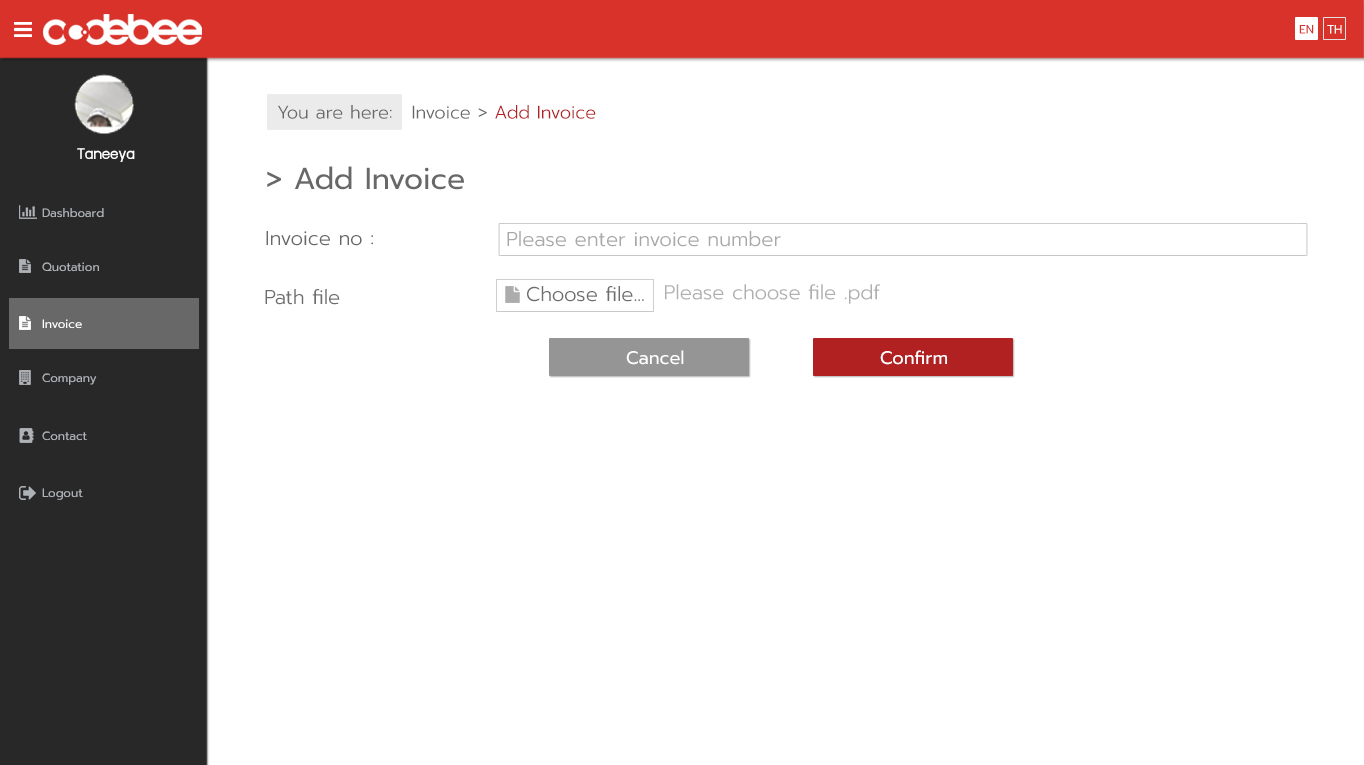
<style>
.page{position:relative;width:1364px;height:765px;background:#ffffff}
.page>*{position:absolute;margin:0}
.t1{font:12px "Prompt-Regular";color:#d8322b}
.t2{font:12px "Prompt-Regular";color:#ffffff}
.t3{font:18px "Prompt-Light";color:#686868}
.t4{font:18px "Prompt-Light";color:#b22121}
.t5{font:18px "supermarket";color:#ffffff}
.t6{font:30px "Prompt-Regular";color:#686868}
.t7{font:12px "Prompt-Regular";color:#aeb2b7}
.t8{font:20px "Prompt-Light";color:#686868}
.t9{font:20px "Prompt-Light";color:#a9a7a7}
.t10{font:20px "Prompt-Light";color:#acacac}
.t11{font:18px "Prompt-Regular";color:#ffffff}
</style>
<div class="page">
<p class="t1" style="left:1299px;top:25px;width:15px;height:9px">EN</p>
<p class="t2" style="left:1327px;top:25px;width:15px;height:9px">TH</p>
<p class="t3" style="left:278px;top:105px;width:114px;height:14px">You are here:</p>
<p class="t4" style="left:412px;top:105px;width:184px;height:14px"><span class="t3">Invoice &gt; </span>Add Invoice</p>
<p class="t5" style="left:77px;top:148px;width:58px;height:14px">Taneeya</p>
<p class="t6" style="left:267px;top:166px;width:197px;height:24px">&gt; Add Invoice</p>
<p class="t7" style="left:42px;top:208px;width:62px;height:10px">Dashboard</p>
<p class="t8" style="left:266px;top:231px;width:107px;height:15px">Invoice no :</p>
<p class="t9" style="left:507px;top:231px;width:274px;height:16px">Please enter invoice number</p>
<p class="t7" style="left:42px;top:262px;width:57px;height:10px">Quotation</p>
<p class="t8" style="left:265px;top:289px;width:75px;height:16px">Path file</p>
<p class="t8" style="left:527px;top:286px;width:117px;height:16px">Choose file...</p>
<p class="t10" style="left:665px;top:284px;width:215px;height:20px">Please choose file .pdf</p>
<p class="t2" style="left:42px;top:319px;width:40px;height:10px">Invoice</p>
<p class="t11" style="left:626px;top:350px;width:58px;height:15px">Cancel</p>
<p class="t11" style="left:880px;top:350px;width:67px;height:15px">Confirm</p>
<p class="t7" style="left:42px;top:373px;width:55px;height:12px">Company</p>
<p class="t7" style="left:42px;top:431px;width:45px;height:10px">Contact</p>
<p class="t7" style="left:42px;top:488px;width:41px;height:12px">Logout</p>
</div>
